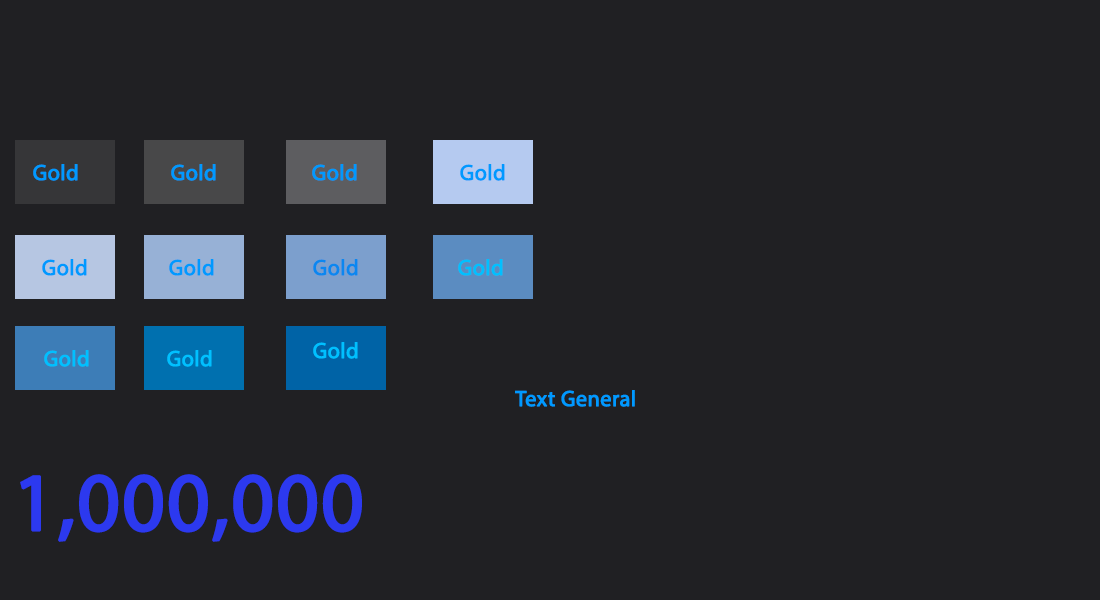
<style>
.page{position:relative;width:1100px;height:600px;background:#202023}
.page>*{position:absolute;margin:0}
.t1{font:22px "MyriadPro-Regular";color:#0099ff;font-weight:bold}
.t2{font:22px "MyriadPro-Regular";color:#0b87f0;font-weight:bold}
.t3{font:22px "MyriadPro-Regular";color:#00c0ff;font-weight:bold}
.t4{font:82.8px "MyriadPro-Regular";color:#2d39ef;font-weight:bold}
</style>
<div class="page">
<p class="t1" style="left:33px;top:164px;width:45px;height:17px">Gold</p>
<p class="t1" style="left:171px;top:164px;width:45px;height:17px">Gold</p>
<p class="t1" style="left:312px;top:164px;width:45px;height:17px">Gold</p>
<p class="t1" style="left:460px;top:164px;width:45px;height:17px">Gold</p>
<p class="t1" style="left:42px;top:259px;width:45px;height:17px">Gold</p>
<p class="t1" style="left:169px;top:259px;width:45px;height:17px">Gold</p>
<p class="t2" style="left:313px;top:259px;width:45px;height:17px">Gold</p>
<p class="t3" style="left:458px;top:259px;width:45px;height:17px">Gold</p>
<p class="t3" style="left:313px;top:342px;width:45px;height:17px">Gold</p>
<p class="t3" style="left:44px;top:350px;width:45px;height:17px">Gold</p>
<p class="t3" style="left:167px;top:350px;width:45px;height:17px">Gold</p>
<p class="t1" style="left:515px;top:390px;width:120px;height:17px">Text General</p>
<p class="t4" style="left:20px;top:474px;width:342px;height:68px">1,000,000</p>
</div>
